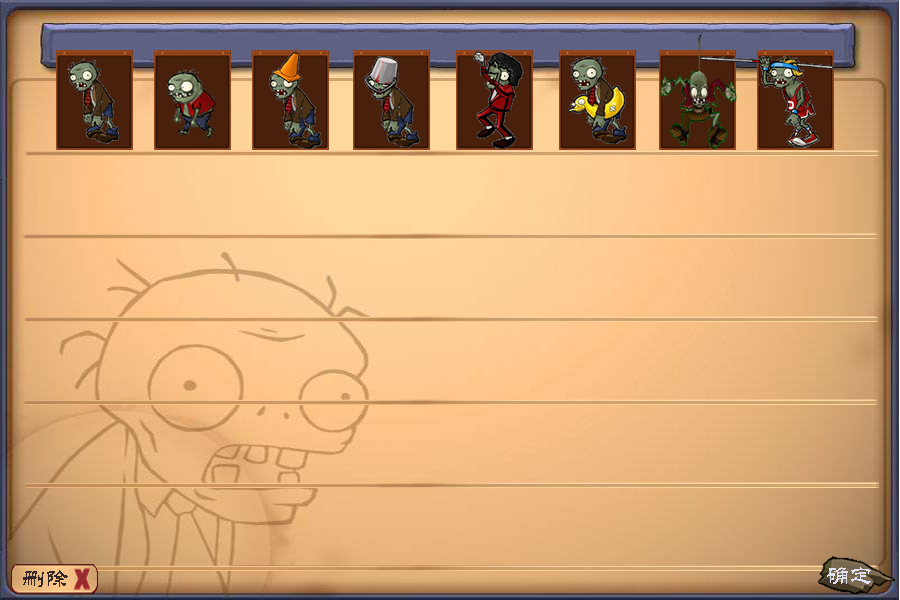
<style>
.page{position:relative;width:900px;height:600px}
.page>*{position:absolute;margin:0}
.t1{font:24px "STLiti";color:#dee2f1}
.t2{font:24px "STLiti";color:#332626}
</style>
<div class="page">
<p class="t1" style="left:827px;top:567px;width:44px;height:17px">确定</p>
<p class="t2" style="left:23px;top:570px;width:45px;height:17px">删除</p>
</div>
